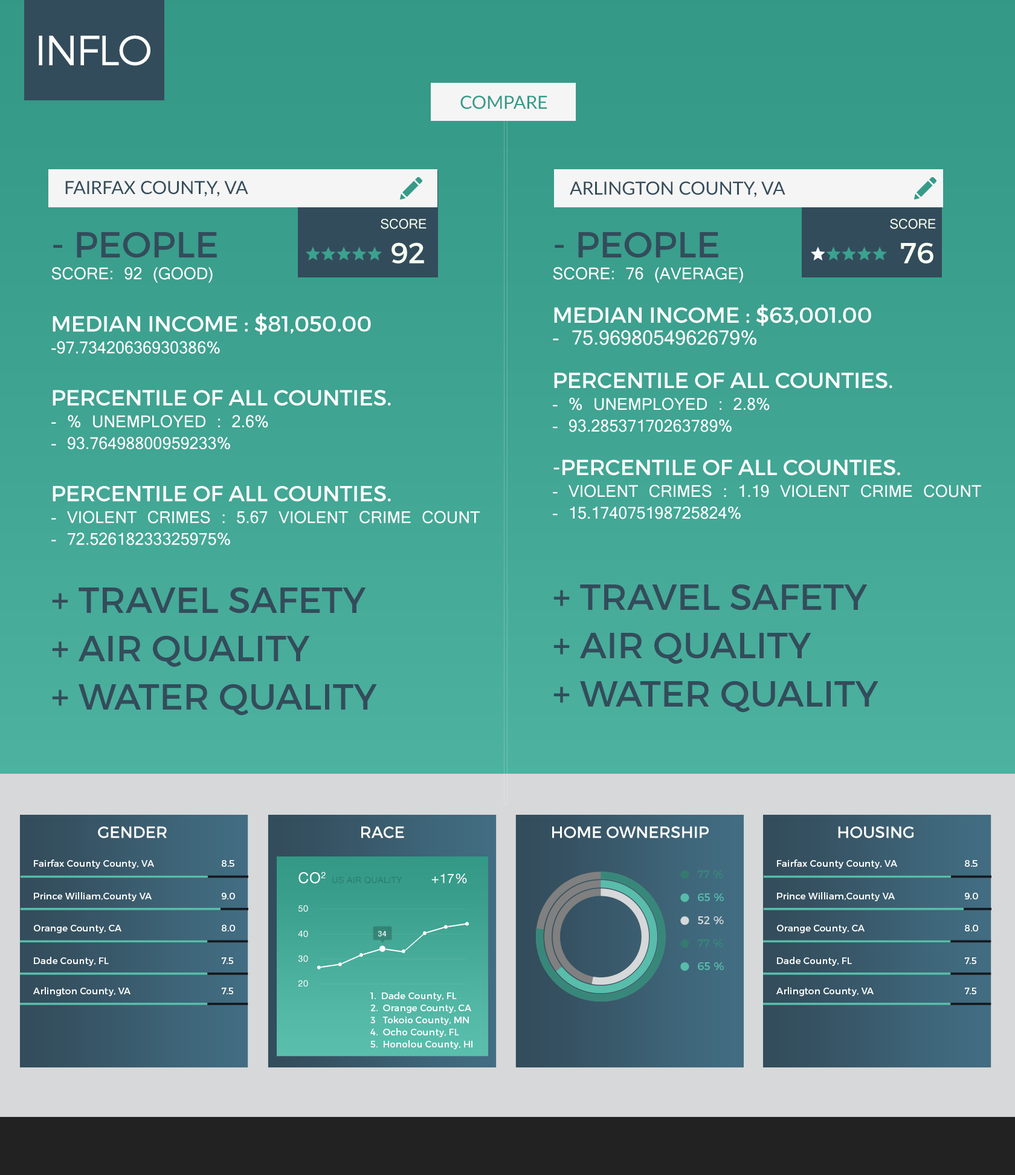
<style>
.page{position:relative;width:1015px;height:1175px}
.page>*{position:absolute;margin:0}
.t1{font:42.2px "Montserrat-Light";letter-spacing:-0.05em;color:#fefefe}
.t2{font:18.1px "Lato-Regular";letter-spacing:-0.005em;color:#359a88;text-transform:uppercase}
.t3{font:18.1px "Lato-Regular";letter-spacing:-0.005em;color:#334c5b;text-transform:uppercase}
.t4{font:14.5px "Latha";color:#f5fff1;text-transform:uppercase}
.t5{font:29px "Montserrat-Regular";color:#f5fff1;text-transform:uppercase}
.t6{font:18.1px "Latha";color:#ffffff;text-transform:uppercase}
.t7{font:21.8px "Montserrat-Regular";color:#ffffff;text-transform:uppercase}
.t8{font:36.3px "Montserrat-Regular";color:#334c5b;text-transform:uppercase}
.t9{font:18.1px/21.8px "Latha";color:#ffffff;text-transform:uppercase}
.t10{font:21.8px/21.8px "Montserrat-Regular";color:#ffffff;text-transform:uppercase}
.t11{font:21.8px/21.8px "Latha";color:#ffffff;text-transform:uppercase}
.t12{font:36.3px/48.3px "Montserrat-Regular";color:#334c5b;text-transform:uppercase}
.t13{font:16.1px "Montserrat-Regular";color:#ffffff;text-transform:uppercase}
.t14{font:9.1px "Montserrat-Regular";letter-spacing:0.025em;color:#ffffff}
.t15{font:15px "HelveticaNeue";letter-spacing:0.03em;color:#ffffff}
.t16{font:8.7px "HelveticaNeue";letter-spacing:0.03em;color:#2a7a6b}
.t17{font:13.1px "HelveticaNeue";letter-spacing:0.03em;color:#ffffff}
.t18{font:10.8px "Montserrat-Regular";letter-spacing:0.025em;color:#37887a}
.t19{font:10.8px "Montserrat-Regular";letter-spacing:0.025em;color:#57bcaa}
.t20{font:8.7px "HelveticaNeue";letter-spacing:0.03em;color:#ffffff}
.t21{font:10.8px "Montserrat-Regular";letter-spacing:0.025em;color:#d6d8d9}
.t22{font:7.5px "HelveticaNeue-Medium";letter-spacing:0.03em;color:#ffffff}
.t23{font:9.1px/12.1px "Montserrat-Regular";letter-spacing:0.025em;color:#ffffff}
</style>
<div class="page">
<p class="t1" style="left:39px;top:35px;width:111px;height:31px">INFLO</p>
<p class="t2" style="left:460px;top:95px;width:87px;height:14px">compare</p>
<p class="t3" style="left:65px;top:181px;width:183px;height:15px">Fairfax count,y, VA</p>
<p class="t3" style="left:570px;top:181px;width:216px;height:16px">Arlington County, VA</p>
<p class="t4" style="left:381px;top:219px;width:46px;height:44px;text-align:center">Score <br><span class="t5">92</span></p>
<p class="t4" style="left:890px;top:219px;width:46px;height:44px;text-align:center">Score <br><span class="t5">76</span></p>
<p class="t6" style="left:51px;top:231px;width:429px;height:314px"><span class="t7"><br></span><span class="t8">- PEOPLE<br></span>Score: 92 (Good)<br><span class="t7"><br>Median Income : $81,050.00<br></span>-97.73420636930386%<br><span class="t7"><br>Percentile of all counties.<br></span>- % unemployed : 2.6%<br>- 93.76498800959233%<br><span class="t7"><br>Percentile of all counties.<br></span>- Violent Crimes : 5.67 violent crime count<br>- 72.52618233325975%</p>
<p class="t9" style="left:553px;top:231px;width:428px;height:288px"><span class="t8">- PEOPLE<br></span>Score: 76 (Average)<br><span class="t10"><br>Median Income : $63,001.00<br></span><span class="t11">- 75.9698054962679%<br></span><span class="t10"><br>Percentile of all counties.<br></span>- % unemployed : 2.8%<br>- 93.28537170263789%<br><span class="t10"><br>-Percentile of all counties.<br></span>- Violent Crimes : 1.19 violent crime count<br>- 15.174075198725824%</p>
<p class="t12" style="left:52px;top:587px;width:325px;height:128px">+ TRAVEL SAFETY<br>+ AIR QUALITY<br>+ WATER QUALITY</p>
<p class="t12" style="left:553px;top:584px;width:326px;height:128px">+ TRAVEL SAFETY<br>+ AIR QUALITY<br>+ WATER QUALITY</p>
<p class="t13" style="left:98px;top:826px;width:69px;height:12px">Gender</p>
<p class="t13" style="left:361px;top:826px;width:43px;height:12px">race</p>
<p class="t13" style="left:552px;top:826px;width:157px;height:12px">home ownership</p>
<p class="t13" style="left:838px;top:826px;width:76px;height:12px">housing</p>
<p class="t14" style="left:34px;top:859px;width:120px;height:9px">Fairfax County County, VA</p>
<p class="t14" style="left:222px;top:860px;width:12px;height:6px">8.5</p>
<p class="t14" style="left:777px;top:859px;width:120px;height:9px">Fairfax County County, VA</p>
<p class="t14" style="left:965px;top:860px;width:13px;height:6px">8.5</p>
<p class="t15" style="left:298px;top:871px;width:28px;height:12px">CO2</p>
<p class="t16" style="left:332px;top:876px;width:70px;height:7px">US AIR QUALITY</p>
<p class="t17" style="left:431px;top:873px;width:36px;height:10px">+17%</p>
<p class="t18" style="left:697px;top:870px;width:26px;height:8px">77 %</p>
<p class="t14" style="left:34px;top:892px;width:118px;height:9px">Prince William,County VA</p>
<p class="t14" style="left:222px;top:892px;width:13px;height:7px">9.0</p>
<p class="t19" style="left:698px;top:893px;width:26px;height:8px">65 %</p>
<p class="t14" style="left:777px;top:892px;width:118px;height:9px">Prince William,County VA</p>
<p class="t14" style="left:965px;top:892px;width:13px;height:7px">9.0</p>
<p class="t20" style="left:298px;top:905px;width:10px;height:7px">50</p>
<p class="t21" style="left:698px;top:916px;width:26px;height:8px">52 %</p>
<p class="t14" style="left:34px;top:924px;width:87px;height:9px">Orange County, CA</p>
<p class="t14" style="left:222px;top:924px;width:13px;height:7px">8.0</p>
<p class="t20" style="left:298px;top:930px;width:10px;height:7px">40</p>
<p class="t14" style="left:777px;top:924px;width:88px;height:9px">Orange County, CA</p>
<p class="t14" style="left:965px;top:924px;width:13px;height:7px">8.0</p>
<p class="t22" style="left:378px;top:931px;width:8px;height:6px">34</p>
<p class="t18" style="left:697px;top:939px;width:26px;height:8px">77 %</p>
<p class="t14" style="left:34px;top:957px;width:75px;height:9px">Dade County, FL</p>
<p class="t14" style="left:222px;top:957px;width:11px;height:7px">7.5</p>
<p class="t20" style="left:298px;top:955px;width:10px;height:7px">30</p>
<p class="t19" style="left:698px;top:962px;width:26px;height:8px">65 %</p>
<p class="t14" style="left:777px;top:957px;width:75px;height:9px">Dade County, FL</p>
<p class="t14" style="left:965px;top:957px;width:11px;height:7px">7.5</p>
<p class="t14" style="left:33px;top:987px;width:98px;height:9px">Arlington County, VA</p>
<p class="t14" style="left:222px;top:987px;width:11px;height:7px">7.5</p>
<p class="t20" style="left:298px;top:979px;width:10px;height:8px">20</p>
<p class="t14" style="left:776px;top:987px;width:98px;height:9px">Arlington County, VA</p>
<p class="t14" style="left:965px;top:987px;width:11px;height:7px">7.5</p>
<p class="t23" style="left:370px;top:992px;width:103px;height:57px">1.  Dade County, FL<br>2.  Orange County, CA<br>3   Tokoio County, MN<br>4.  Ocho County, FL<br>5.  Honolou County, HI</p>
</div>
